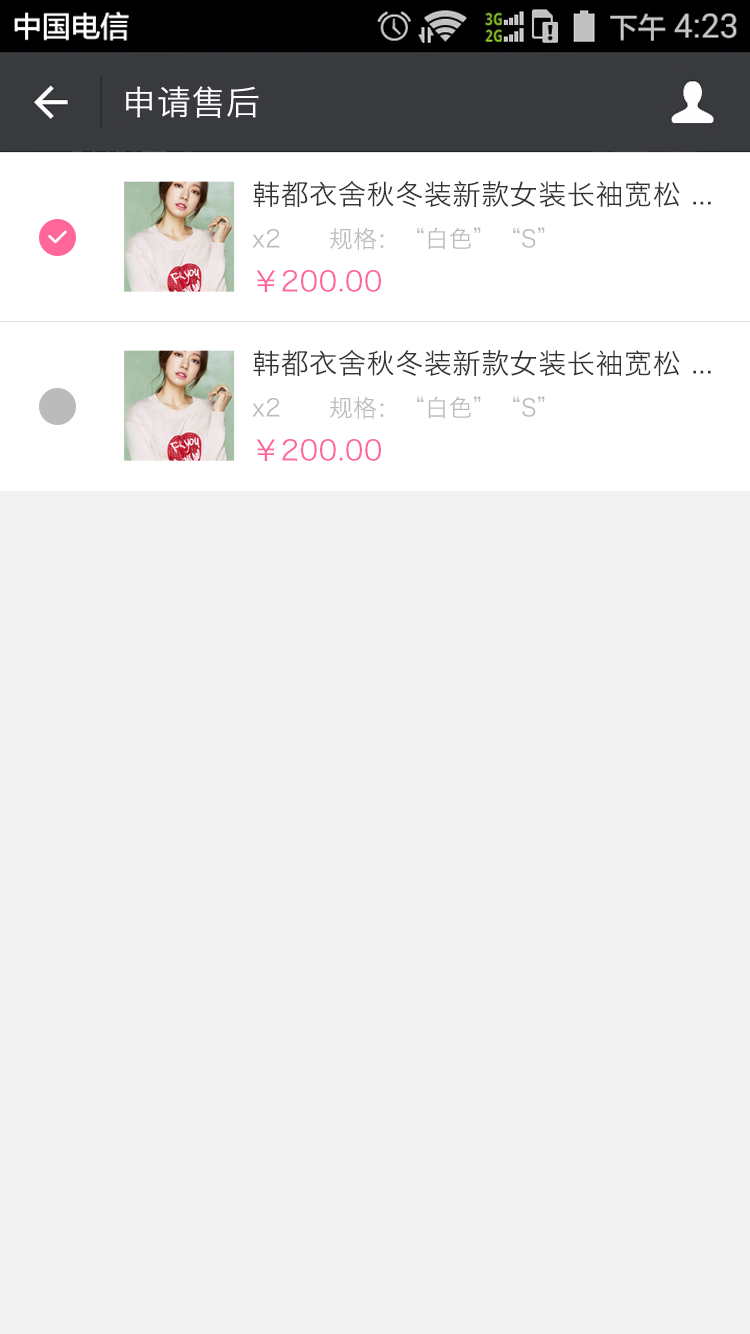
<style>
.page{position:relative;width:750px;height:1334px;background:#f2f2f2}
.page>*{position:absolute;margin:0}
.t1{font:34px "HiraginoSansGB-W3";letter-spacing:0.022em;color:#ffffff}
.t2{font:28px "HiraginoSansGB-W3";letter-spacing:0.022em;color:#333333}
.t3{font:24px "HiraginoSansGB-W3";color:#bbbbbb}
.t4{font:28px "HiraginoSansGB-W3";letter-spacing:0.022em;color:#ff6699}
</style>
<div class="page">
<p class="t1" style="left:126px;top:86px;width:133px;height:32px">申请售后</p>
<p class="t2" style="left:253px;top:180px;width:458px;height:27px">韩都衣舍秋冬装新款女装长袖宽松 ...</p>
<p class="t3" style="left:252px;top:227px;width:293px;height:23px">x2      规格：“白色”“S”</p>
<p class="t4" style="left:256px;top:270px;width:125px;height:22px">￥200.00</p>
<p class="t2" style="left:253px;top:349px;width:458px;height:27px">韩都衣舍秋冬装新款女装长袖宽松 ...</p>
<p class="t3" style="left:252px;top:396px;width:293px;height:23px">x2      规格：“白色”“S”</p>
<p class="t4" style="left:256px;top:439px;width:125px;height:22px">￥200.00</p>
</div>
